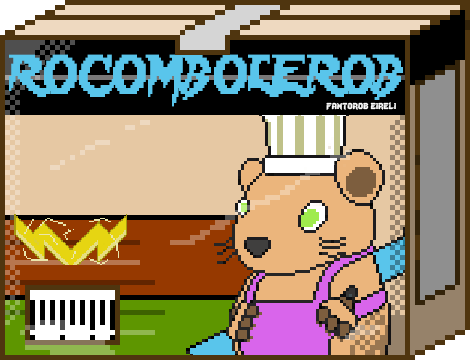
<style>
.page{position:relative;width:470px;height:360px}
.page>*{position:absolute;margin:0}
.t1{font:48.3px "Lady-Radical";color:#59c5eb;scale:0.72 1}
.t2{font:12px "Lady-Radical";color:#fbfbfb}
</style>
<div class="page">
<p class="t1" style="left:9px;top:54px;width:394px;height:53px">ROCOMBOLEROB</p>
<p class="t2" style="left:326px;top:102px;width:70px;height:8px">fantorob eireli</p>
</div>
